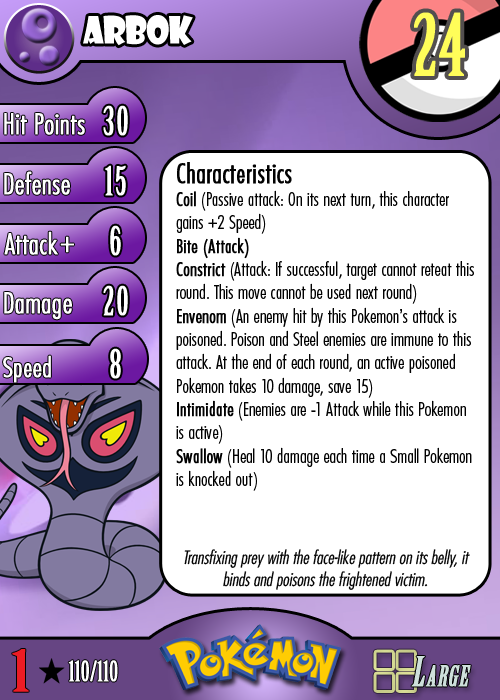
<style>
.page{position:relative;width:500px;height:700px;background:#ffffff}
.page>*{position:absolute;margin:0}
.t1{font:36.7px "ShowcardGothic-Reg";letter-spacing:-0.025em;color:#ffffff;scale:0.91 1}
.t2{font:83.3px "BirchStd";letter-spacing:0.025em;color:#fffd59;font-weight:bold}
.t3{font:27.8px "Futura-CondensedLight";color:#ffffff;font-weight:bold}
.t4{font:38.9px "BirchStd";letter-spacing:0.035em;color:#ffffff;font-weight:bold}
.t5{font:19.4px "FuturaCondensedBQ-Light";color:#010101}
.t6{font:27.8px "FuturaCondensedBQ-Light";color:#010101;font-weight:bold}
.t7{font:19.4px "FuturaCondensedBQ-Light";color:#010101;font-weight:bold}
.t8{font:30.6px "Futura-CondensedLight";color:#ffffff;font-weight:bold}
.t9{font:27.8px "FuturaCondensedBQ-Light";color:#ffffff;font-weight:bold}
.t10{font:18.1px "Futura-CondensedLight";color:#010101;font-style:italic}
.t11{font:55.6px "BirchStd";color:#ed1c24;font-weight:bold;scale:1.5 1}
.t12{font:27.8px "BirchStd";color:#ffffff;font-weight:bold}
</style>
<div class="page">
<p class="t1" style="left:83px;top:15px;width:110px;height:31px">arbok</p>
<p class="t2" style="left:414px;top:12px;width:51px;height:64px">24</p>
<p class="t3" style="left:4px;top:113px;width:81px;height:22px">Hit Points</p>
<p class="t4" style="left:103px;top:105px;width:25px;height:31px">30</p>
<p class="t3" style="left:4px;top:171px;width:66px;height:24px">Defense</p>
<p class="t4" style="left:105px;top:165px;width:21px;height:31px">15</p>
<p class="t5" style="left:176px;top:162px;width:298px;height:329px"><span class="t6">Characteristics<br></span><span class="t7">Coil</span> (Passive attack: On its next turn, this character gains +2 Speed)<br><span class="t7">Bite (Attack)<br>Constrict</span> (Attack: If successful, target cannot reteat this round. This move cannot be used next round)<br><span class="t7">Envenom</span> (An enemy hit by this Pokemon’s attack is poisoned. Poison and Steel enemies are immune to this attack. At the end of each round, an active poisoned Pokemon takes 10 damage, save 15)<br><span class="t7">Intimidate</span> (Enemies are -1 Attack while this Pokemon is active)<br><span class="t7">Swallow</span> (Heal 10 damage each time a Small Pokemon is knocked out)</p>
<p class="t3" style="left:4px;top:231px;width:54px;height:24px">Attack</p>
<p class="t4" style="left:110px;top:225px;width:11px;height:31px">6</p>
<p class="t8" style="left:60px;top:236px;width:14px;height:17px">+</p>
<p class="t3" style="left:4px;top:292px;width:68px;height:28px">Damage</p>
<p class="t4" style="left:103px;top:285px;width:25px;height:31px">20</p>
<p class="t4" style="left:110px;top:348px;width:11px;height:31px">8</p>
<p class="t9" style="left:3px;top:355px;width:48px;height:28px">Speed</p>
<p class="t10" style="left:184px;top:549px;width:286px;height:41px;text-align:center">Transfixing prey with the face-like pattern on its belly, it binds and poisons the frightened victim.</p>
<p class="t11" style="left:12px;top:649px;width:17px;height:43px">1</p>
<p class="t12" style="left:68px;top:660px;width:50px;height:22px">110/110</p>
</div>
